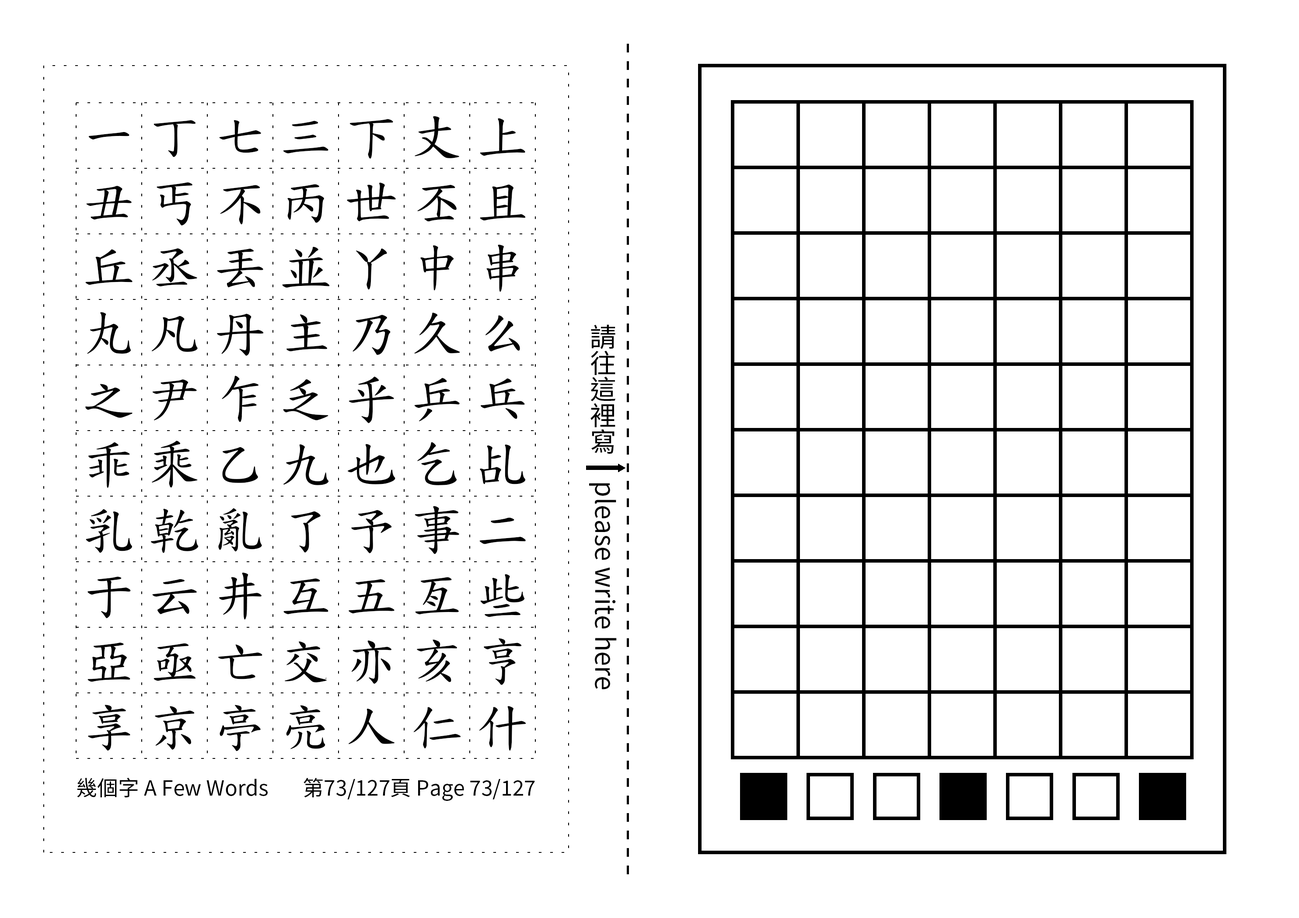
<style>
.page{position:relative;width:1299px;height:918px;background:#ffffff}
.page>*{position:absolute;margin:0}
.t1{font:52.5px/65.6px "TW-Kai-98_1";letter-spacing:0.25em;color:#000000}
.t2{font:26.2px "SourceHanSansTC-Regular";color:#000000}
.t3{font:21px "SourceHanSansTC-Regular";color:#000000}
</style>
<div class="page">
<p class="t1" style="left:85px;top:116px;width:441px;height:636px;text-align:center">一丁七三下丈上丑丐不丙世丕且丘丞丟並丫中串丸凡丹主乃久么之尹乍乏乎乒乓乖乘乙九也乞乩乳乾亂了予事二于云井互五亙些亞亟亡交亦亥亨享京亭亮人仁什</p>
<p class="t2" style="left:589px;top:324px;width:28px;height:366px;text-align:center">請往這裡寫　please write here</p>
<p class="t3" style="left:77px;top:778px;width:191px;height:20px">幾個字 A Few Words</p>
<p class="t3" style="left:303px;top:778px;width:232px;height:23px">第73/127頁 Page 73/127</p>
</div>
